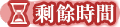
<style>
.page{position:relative;width:120px;height:27px;background:#b42d2c}
.page>*{position:absolute;margin:0}
.t1{font:20px "RyuminPr6N-ExBold";color:#fffffe}
</style>
<div class="page">
<p class="t1" style="left:35px;top:3px;width:79px;height:20px">剩餘時間</p>
</div>
